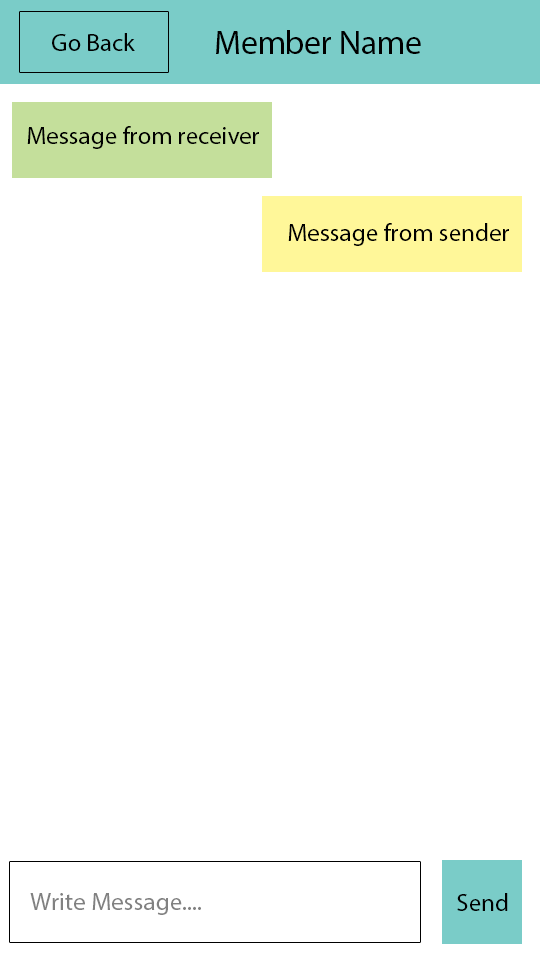
<style>
.page{position:relative;width:540px;height:960px;background:#ffffff}
.page>*{position:absolute;margin:0}
.t1{font:33.3px "MyriadPro-Regular";color:#000000}
.t2{font:25px "MyriadPro-Regular";color:#000000}
.t3{font:25px "MyriadPro-Regular";color:#818181}
</style>
<div class="page">
<p class="t1" style="left:216px;top:30px;width:205px;height:24px">Member Name</p>
<p class="t2" style="left:52px;top:33px;width:83px;height:18px">Go Back</p>
<p class="t2" style="left:27px;top:126px;width:232px;height:23px">Message from receiver</p>
<p class="t2" style="left:288px;top:223px;width:221px;height:23px">Message from sender</p>
<p class="t3" style="left:30px;top:893px;width:171px;height:22px">Write Message....</p>
<p class="t2" style="left:457px;top:893px;width:51px;height:18px">Send</p>
</div>
